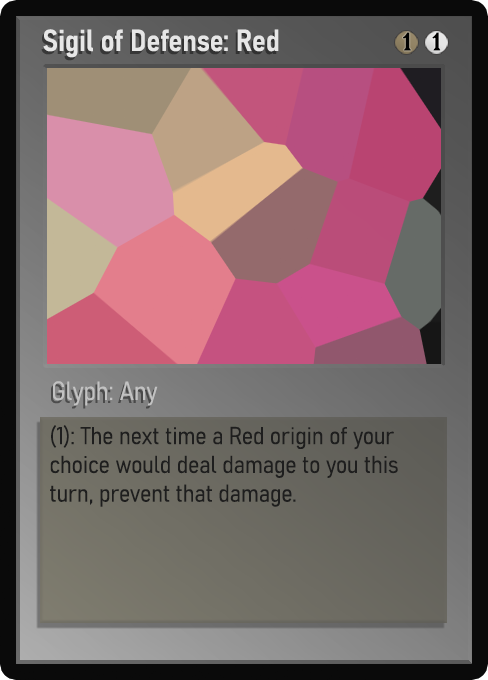
<style>
.page{position:relative;width:488px;height:680px}
.page>*{position:absolute;margin:0}
.t1{font:30px "Bahnschrift-SemiBoldSemiCondensed";color:#f2f2f2;font-weight:bold}
.t2{font:25px "WTRRoycroft";color:#000000;font-weight:bold;scale:1.09 1}
.t3{font:26px "Bahnschrift-LightSemiCondensed";color:#c8c8c8;font-weight:bold}
.t4{font:24px "Bahnschrift-LightSemiCondensed";color:#1e1e1e;font-weight:bold}
</style>
<div class="page">
<p class="t1" style="left:43px;top:29px;width:236px;height:29px;opacity:0.9">Sigil of Defense: Red</p>
<p class="t2" style="left:403px;top:32px;width:8px;height:19px">1</p>
<p class="t2" style="left:432px;top:32px;width:9px;height:19px">1</p>
<p class="t3" style="left:53px;top:381px;width:105px;height:25px;opacity:0.9">Glyph: Any</p>
<p class="t4" style="left:50px;top:425px;width:348px;height:82px">(1): The next time a Red origin of your choice would deal damage to you this turn, prevent that damage.</p>
</div>
